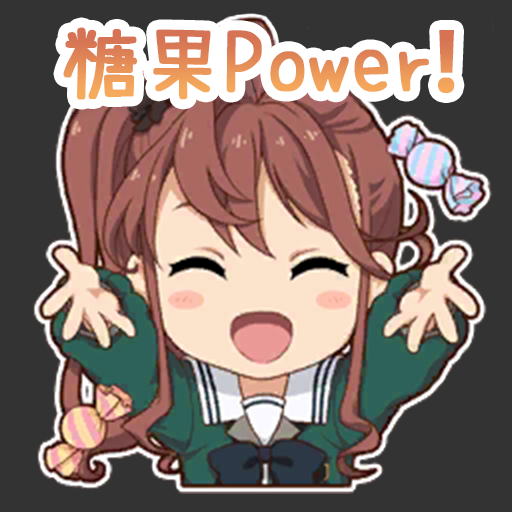
<style>
.page{position:relative;width:512px;height:512px;background:#333333}
.page>*{position:absolute;margin:0}
.t1{font:79.9px "SetoFont";font-weight:bold}
.t2{font:79.9px "AdobeGothicStd-Bold";font-weight:bold}
</style>
<div class="page">
<p class="t1" style="left:63px;top:27px;width:392px;height:73px">糖果Power<span class="t2">!</span></p>
</div>
